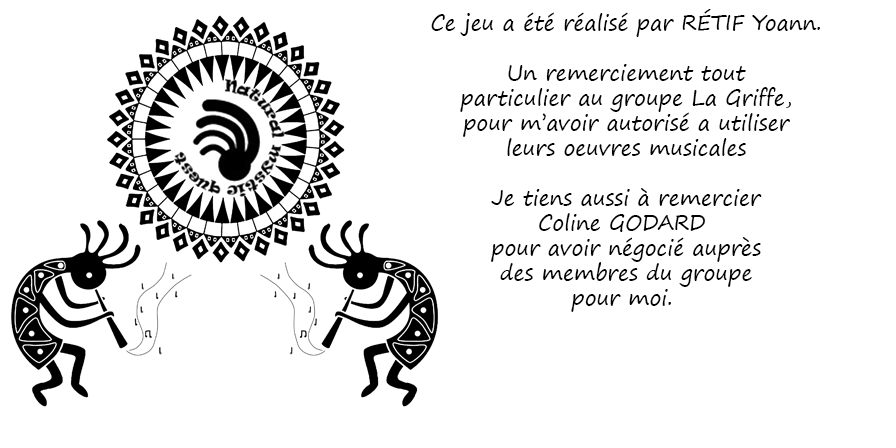
<style>
.page{position:relative;width:896px;height:448px;background:#ffffff}
.page>*{position:absolute;margin:0}
.t1{font:20.8px "SegoePrint";color:#000000}
</style>
<div class="page">
<p class="t1" style="left:431px;top:9px;width:389px;height:303px;text-align:center">Ce jeu a été réalisé par RÉTIF Yoann.<br><br>Un remerciement tout<br>particulier au groupe La Griffe,<br>pour m’avoir autorisé a utiliser<br>leurs oeuvres musicales<br><br>Je tiens aussi à remercier<br>Coline GODARD <br>pour avoir négocié auprès<br>des membres du groupe<br>pour moi.</p>
</div>
